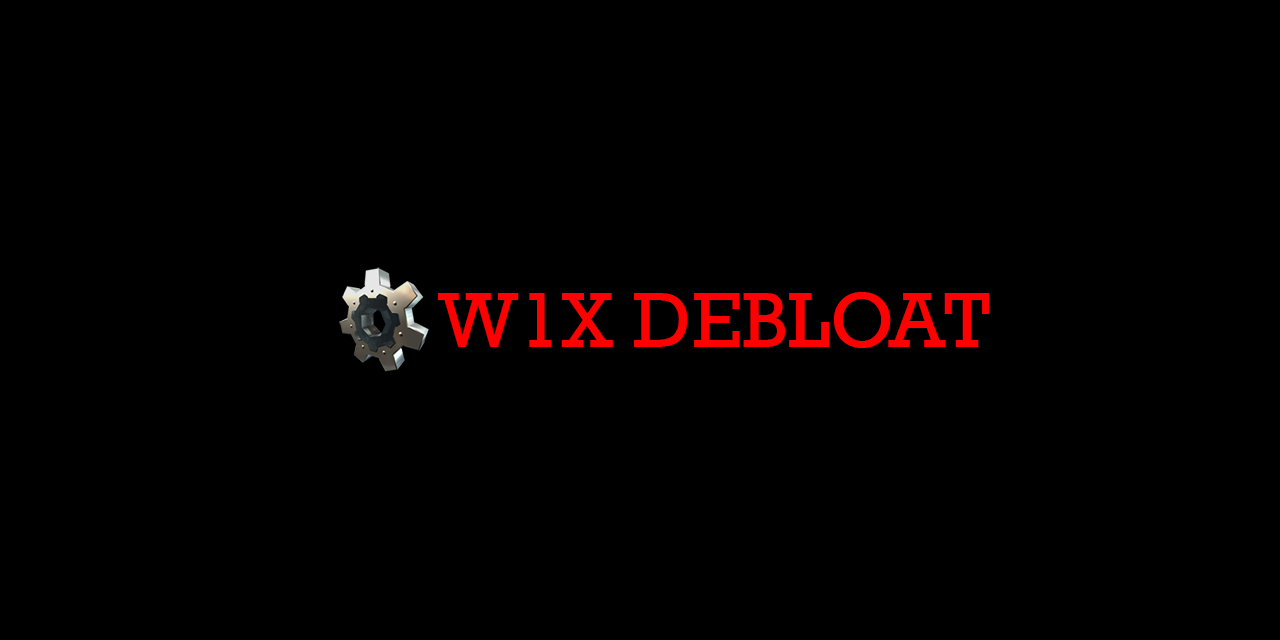
<style>
.page{position:relative;width:1280px;height:640px;background:#000000}
.page>*{position:absolute;margin:0}
.t1{font:80px "Rockwell";color:#ff0000}
</style>
<div class="page">
<p class="t1" style="left:438px;top:292px;width:551px;height:56px">W1X DEBLOAT</p>
</div>
